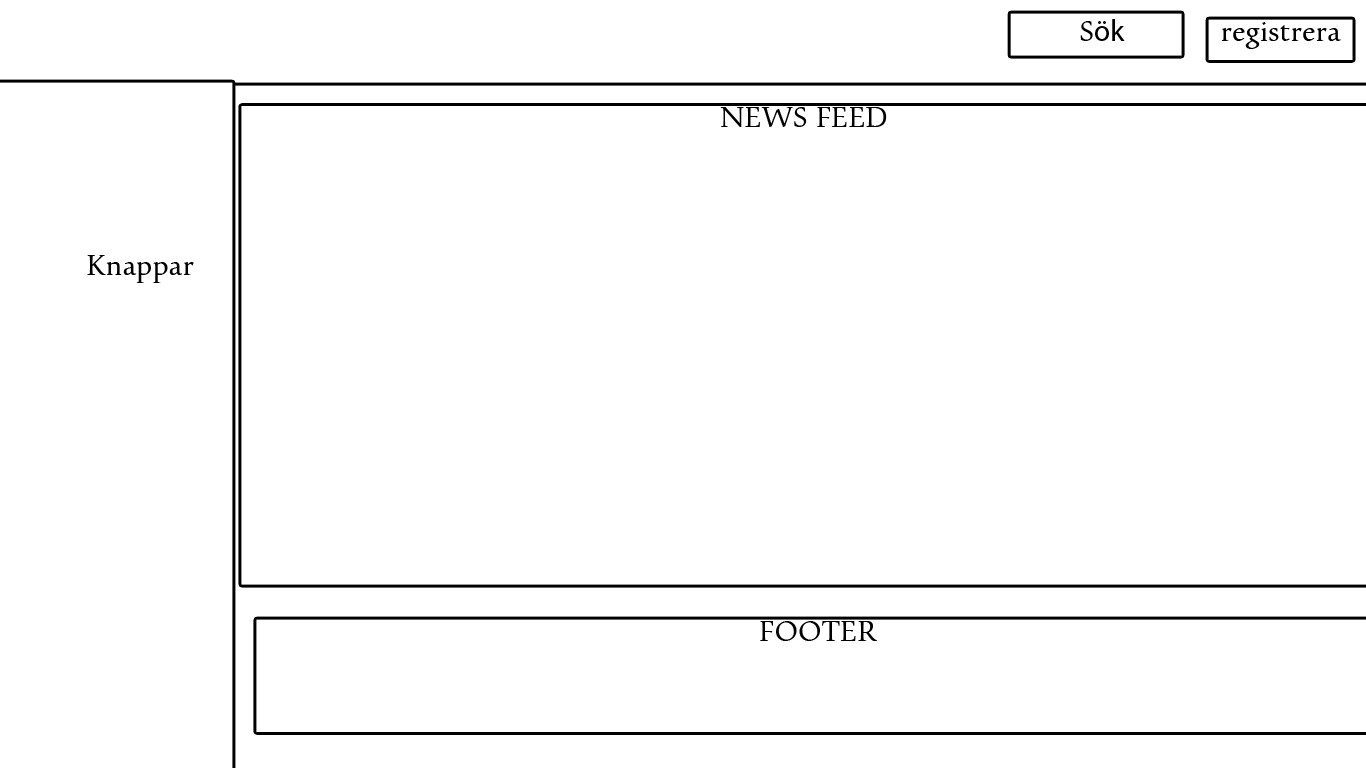
<style>
.page{position:relative;width:1366px;height:768px;background:#ffffff}
.page>*{position:absolute;margin:0}
.t1{font:30px "MyriadPro-Regular";color:#000000}
.t2{font:30px "Pescadero";color:#000000}
</style>
<div class="page">
<p class="t1" style="left:1080px;top:19px;width:45px;height:22px"><span class="t2">S</span>ök</p>
<p class="t2" style="left:1221px;top:22px;width:120px;height:27px">registrera</p>
<p class="t2" style="left:720px;top:107px;width:167px;height:20px">NEWS FEED</p>
<p class="t2" style="left:87px;top:255px;width:107px;height:28px">Knappar</p>
<p class="t2" style="left:760px;top:620px;width:117px;height:21px">FOOTER</p>
</div>
